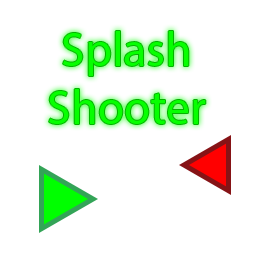
<style>
.page{position:relative;width:256px;height:256px;background:#ffffff}
.page>*{position:absolute;margin:0}
.t1{font:48px "MyriadPro-Regular";color:#06ff00}
</style>
<div class="page">
<p class="t1" style="left:49px;top:31px;width:157px;height:93px;text-align:center">Splash<br>Shooter</p>
</div>
